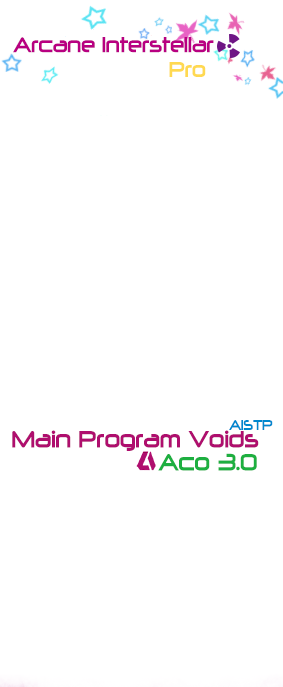
<style>
.page{position:relative;width:283px;height:687px;background:#ffffff}
.page>*{position:absolute;margin:0}
.t1{font:24px "497-CAI978";color:#b80081;scale:0.8 1}
.t2{font:24px "497-CAI978";color:#ffd951;scale:0.8 1}
.t3{font:16px "497-CAI978";color:#0087ce;scale:0.8 1}
.t4{font:26.7px "497-CAI978";color:#af0e6e;scale:0.8 1}
.t5{font:26.7px "497-CAI978";color:#1daf40;scale:0.8 1}
</style>
<div class="page">
<p class="t1" style="left:13px;top:37px;width:201px;height:16px">Arcane Interstellar</p>
<p class="t2" style="left:169px;top:62px;width:37px;height:15px">Pro</p>
<p class="t3" style="left:229px;top:420px;width:44px;height:10px">AISTP</p>
<p class="t4" style="left:12px;top:430px;width:247px;height:21px">Main Program Voids</p>
<p class="t5" style="left:158px;top:453px;width:99px;height:18px">Aco 3.0</p>
</div>
